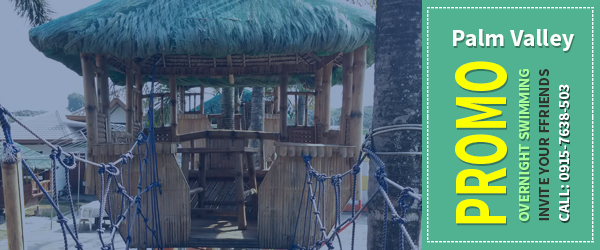
<style>
.page{position:relative;width:600px;height:250px;background:#50b291}
.page>*{position:absolute;margin:0}
.t1{font:12px "SourceSansPro-Bold";color:#fdfffd}
.t2{font:12.1px "SourceSansPro-Bold";color:#fdfffd}
.t3{font:24px "SourceSansPro-Bold";color:#fdfffd}
.t4{font:76.6px "SourceSansPro-Bold";color:#fcff00;scale:0.65 1}
.t5{font:14.8px "SourceSansPro-Bold";color:#aaff99}
.t6{font:14.8px "SourceSansPro-Bold";color:#2e342c}
.t7{font:14.8px "SourceSansPro-Bold";color:#fdfffd}
</style>
<div class="page">
<p class="t1" style="left:427px;top:7px;width:167px;height:2px">------------------------------------------</p>
<p class="t2" style="left:427px;top:10px;width:2px;height:230px;rotate:-90deg">----------------------------------------------------------</p>
<p class="t2" style="left:592px;top:10px;width:2px;height:230px;rotate:-90deg">----------------------------------------------------------</p>
<p class="t3" style="left:453px;top:29px;width:121px;height:22px">Palm Valley</p>
<p class="t4" style="left:455px;top:61px;width:52px;height:163px;rotate:-90deg">PROMO</p>
<p class="t5" style="left:519px;top:69px;width:10px;height:152px;rotate:-90deg">OVERNIGHT SWIMMING</p>
<p class="t6" style="left:539px;top:69px;width:10px;height:152px;rotate:-90deg">INVITE YOUR FFRIENDS</p>
<p class="t7" style="left:559px;top:84px;width:10px;height:137px;rotate:-90deg">CALL: 0915-7638-503</p>
<p class="t1" style="left:427px;top:241px;width:167px;height:2px">------------------------------------------</p>
</div>
